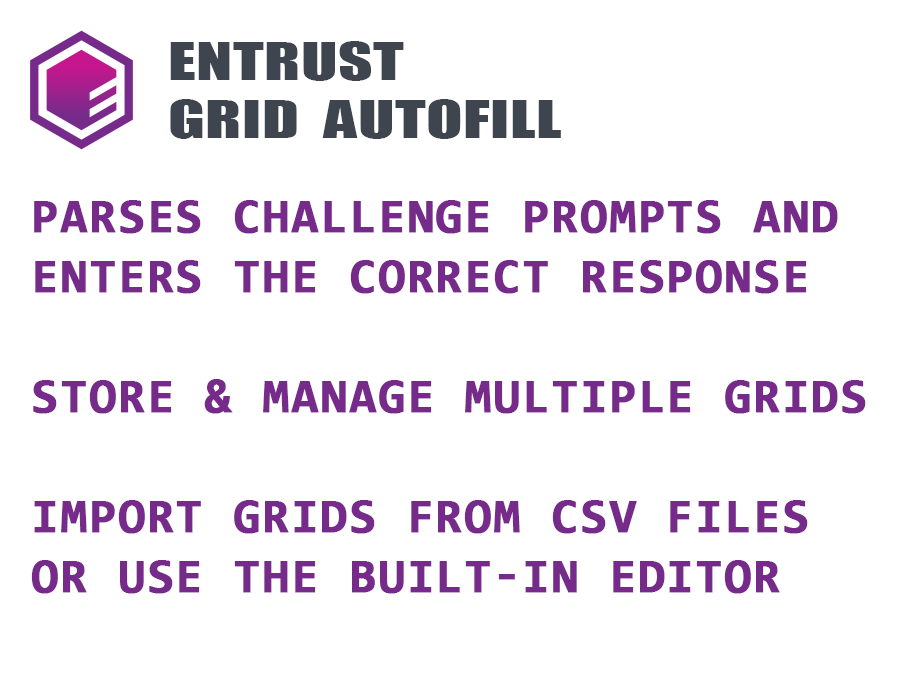
<style>
.page{position:relative;width:920px;height:680px;background:#ffffff}
.page>*{position:absolute;margin:0}
.t1{font:48px "Impact";letter-spacing:0.005em;color:#3f454f;text-transform:uppercase;scale:1.4 1}
.t2{font:48px/60px "Consolas-Bold";letter-spacing:0.025em;color:#762b8a;text-transform:uppercase;font-weight:bold}
</style>
<div class="page">
<p class="t1" style="left:170px;top:41px;width:391px;height:98px">Entrust<br>Grid  Autofill</p>
<p class="t2" style="left:31px;top:200px;width:835px;height:394px">Parses challenge prompts and<br>enters the correct response<br><br>Store &amp; Manage multiple grids<br><br>import grids from CSV files<br>Or use the built-in editor</p>
</div>
